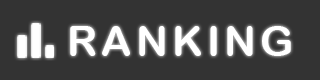
<style>
.page{position:relative;width:320px;height:80px;background:#333333}
.page>*{position:absolute;margin:0}
.t1{font:41.8px "ArialRoundedMTBold";letter-spacing:0.1em;color:#ffffff}
</style>
<div class="page">
<p class="t1" style="left:70px;top:26px;width:221px;height:30px">RANKING</p>
</div>
